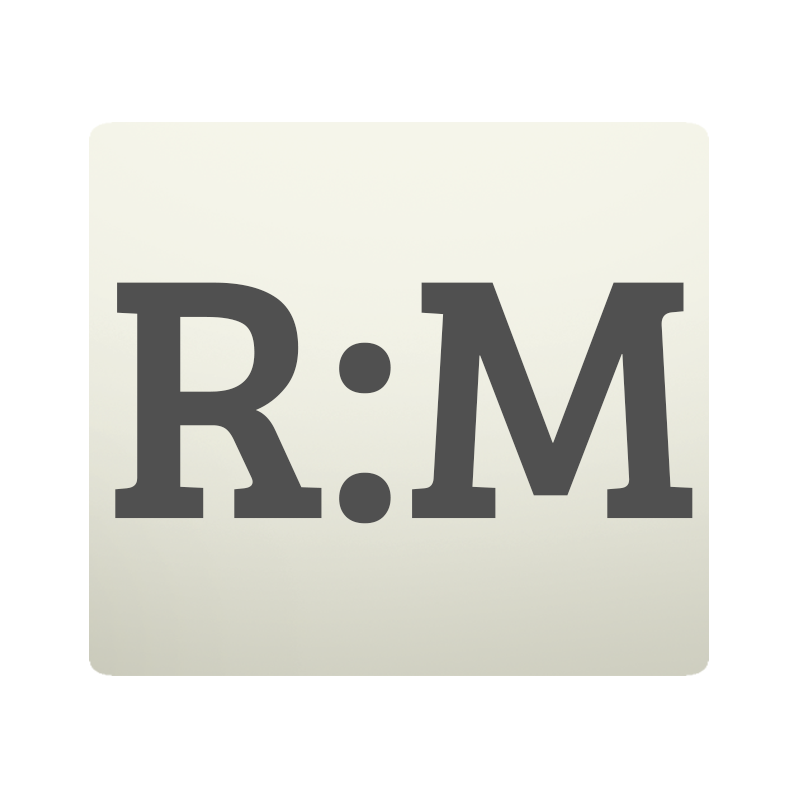
<style>
.page{position:relative;width:800px;height:800px;background:#ffffff}
.page>*{position:absolute;margin:0}
.t1{font:354.1px "BreeSerif-Regular";color:#505050}
</style>
<div class="page">
<p class="t1" style="left:115px;top:282px;width:578px;height:242px">R:M</p>
</div>
